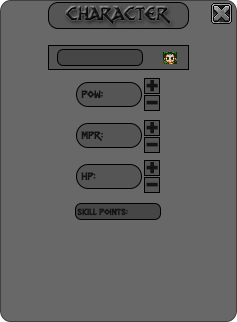
<style>
.page{position:relative;width:237px;height:322px;background:#686868}
.page>*{position:absolute;margin:0}
.t1{font:22px "DragonSlapper";color:#131313}
.t2{font:30px "DragonSlapper";color:#131313}
.t3{font:12px "DragonSlapper";color:#131313}
.t4{font:10px "DragonSlapper";color:#131313}
</style>
<div class="page">
<p class="t1" style="left:66px;top:6px;width:105px;height:19px">character</p>
<p class="t2" style="left:146px;top:80px;width:12px;height:12px">+</p>
<p class="t3" style="left:81px;top:90px;width:22px;height:9px">pow:</p>
<p class="t2" style="left:146px;top:100px;width:12px;height:5px">-</p>
<p class="t2" style="left:146px;top:122px;width:12px;height:12px">+</p>
<p class="t3" style="left:81px;top:131px;width:22px;height:11px">mpr:</p>
<p class="t2" style="left:146px;top:142px;width:12px;height:5px">-</p>
<p class="t3" style="left:81px;top:172px;width:15px;height:9px">hp:</p>
<p class="t2" style="left:146px;top:162px;width:12px;height:12px">+</p>
<p class="t2" style="left:146px;top:182px;width:12px;height:5px">-</p>
<p class="t4" style="left:77px;top:208px;width:51px;height:8px">skill points:</p>
</div>
